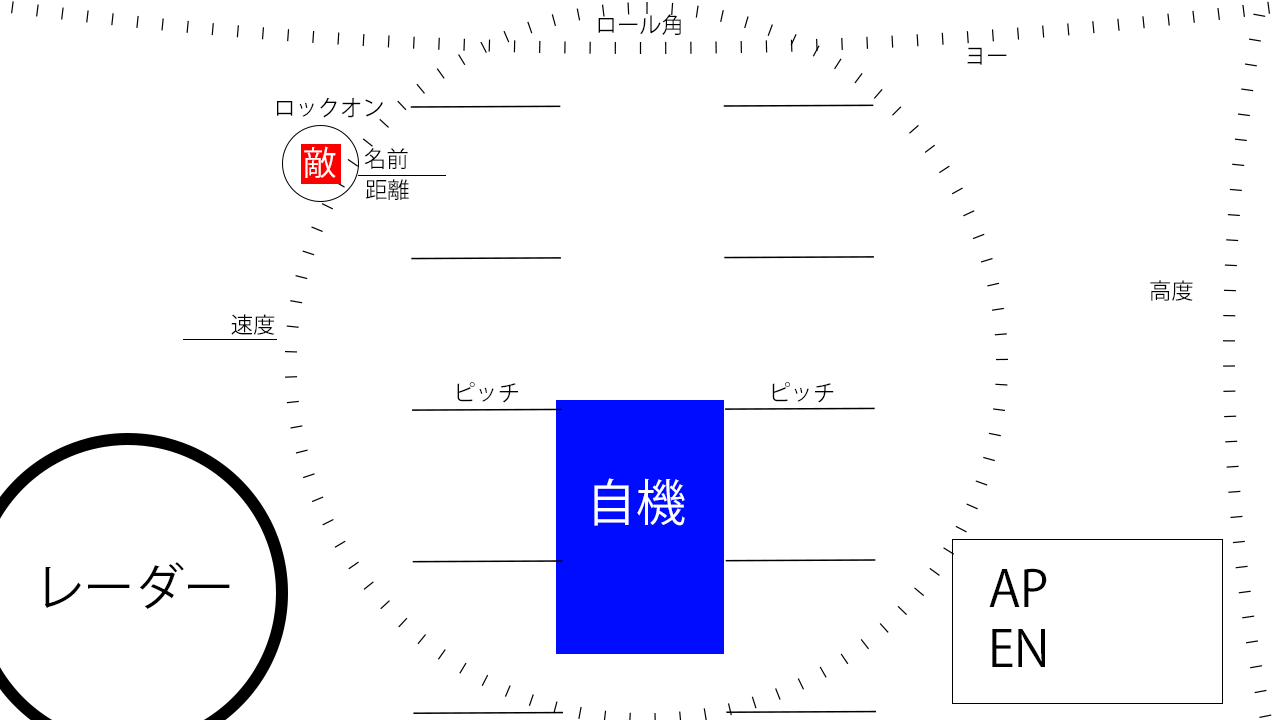
<style>
.page{position:relative;width:1280px;height:720px;background:#ffffff}
.page>*{position:absolute;margin:0}
.t1{font:22.2px "KozGoPr6N-Regular";color:#000000}
.t2{font:33.3px "KozGoPr6N-Regular";color:#ffffff}
.t3{font:50px "KozGoPr6N-Regular";color:#ffffff}
.t4{font:50px "KozGoPr6N-Regular";color:#000000}
</style>
<div class="page">
<p class="t1" style="left:598px;top:14px;width:83px;height:21px">ロール角</p>
<p class="t1" style="left:967px;top:47px;width:40px;height:18px">ヨー</p>
<p class="t1" style="left:277px;top:97px;width:106px;height:21px">ロックオン</p>
<p class="t2" style="left:304px;top:146px;width:32px;height:32px">敵</p>
<p class="t1" style="left:364px;top:148px;width:44px;height:21px">名前</p>
<p class="t1" style="left:365px;top:179px;width:44px;height:21px">距離</p>
<p class="t1" style="left:1150px;top:280px;width:43px;height:21px">高度</p>
<p class="t1" style="left:231px;top:314px;width:44px;height:21px">速度</p>
<p class="t1" style="left:457px;top:382px;width:61px;height:21px">ピッチ</p>
<p class="t1" style="left:772px;top:382px;width:62px;height:21px">ピッチ</p>
<p class="t3" style="left:594px;top:478px;width:91px;height:48px">自機</p>
<p class="t4" style="left:45px;top:562px;width:185px;height:47px">レーダー</p>
<p class="t4" style="left:989px;top:568px;width:58px;height:99px">AP<br>EN</p>
</div>
